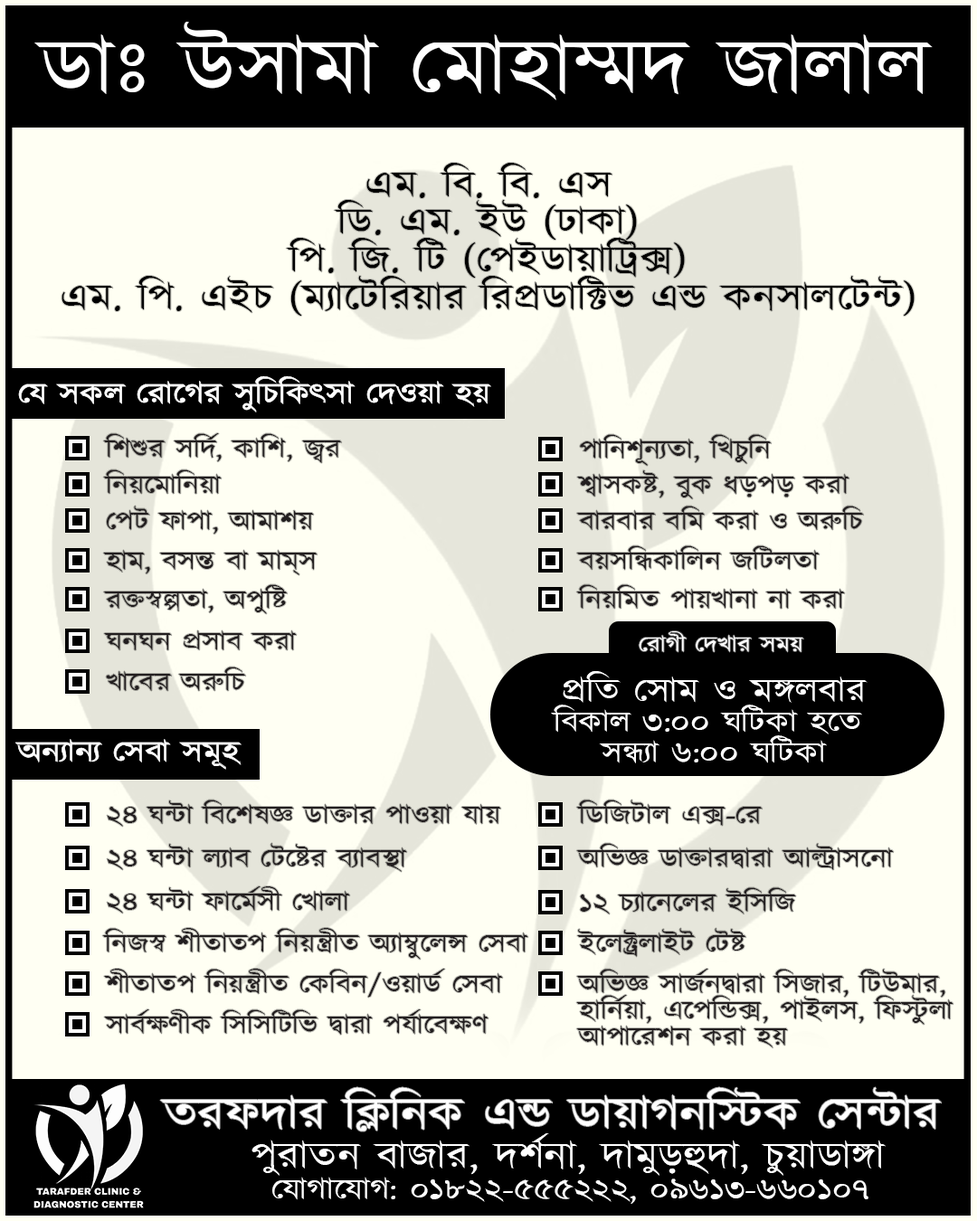
<style>
.page{position:relative;width:977px;height:1221px;background:#fffff3}
.page>*{position:absolute;margin:0}
.t1{font:79.1px "Kalpurush";color:#ffffff;scale:1.16 1}
.t2{font:37.7px/37.7px "Kalpurush";color:#000000;scale:1.16 1}
.t3{font:30.1px "Kalpurush";color:#ffffff;scale:1.16 1}
.t4{font:26.4px "Kalpurush";color:#231f20;scale:1.16 1}
.t5{font:22.6px "Kalpurush";color:#ffffff;scale:1.16 1}
.t6{font:30.1px/30.1px "Kalpurush";color:#ffffff;scale:1.16 1}
.t7{font:33.9px/30.1px "Kalpurush";color:#ffffff;scale:1.16 1}
.t8{font:26.4px/26.4px "Kalpurush";color:#231f20;scale:1.16 1}
.t9{font:45.2px "Kalpurush";color:#ffffff;scale:1.16 1}
.t10{font:37.7px "Kalpurush";color:#ffffff;scale:1.16 1}
</style>
<div class="page">
<p class="t1" style="left:34px;top:22px;width:898px;height:78px">ডাঃ উসামা মোহাম্মদ জালাল</p>
<p class="t2" style="left:61px;top:163px;width:853px;height:154px;text-align:center">এম. বি. বি. এস<br>ডি. এম. ইউ (ঢাকা)<br>পি. জি. টি (পেইডায়াট্রিক্স)<br>এম. পি. এইচ (ম্যাটেরিয়ার রিপ্রডাক্টিভ এন্ড কনসালটেন্ট)</p>
<p class="t3" style="left:18px;top:375px;width:473px;height:38px">যে সকল রোগের সুচিকিৎসা দেওয়া হয়</p>
<p class="t4" style="left:103px;top:433px;width:239px;height:30px">শিশুর সর্দি, কাশি, জ্বর</p>
<p class="t4" style="left:580px;top:434px;width:191px;height:32px">পানিশূন্যতা, খিচুনি</p>
<p class="t4" style="left:103px;top:469px;width:119px;height:25px">নিয়মোনিয়া</p>
<p class="t4" style="left:577px;top:470px;width:272px;height:29px">শ্বাসকষ্ট, বুক ধড়পড় করা</p>
<p class="t4" style="left:106px;top:506px;width:208px;height:28px">পেট ফাপা, আমাশয়</p>
<p class="t4" style="left:576px;top:506px;width:288px;height:24px">বারবার বমি করা ও অরুচি</p>
<p class="t4" style="left:576px;top:545px;width:243px;height:26px">বয়সন্ধিকালিন জটিলতা</p>
<p class="t4" style="left:103px;top:550px;width:214px;height:25px">হাম, বসন্ত বা মাম্‌স</p>
<p class="t4" style="left:103px;top:584px;width:185px;height:30px">রক্তস্বল্পতা, অপুষ্টি</p>
<p class="t4" style="left:576px;top:584px;width:269px;height:25px">নিয়মিত পায়খানা না করা</p>
<p class="t4" style="left:104px;top:630px;width:193px;height:20px">ঘনঘন প্রসাব করা</p>
<p class="t5" style="left:638px;top:631px;width:166px;height:21px">রোগী দেখার সময়</p>
<p class="t4" style="left:106px;top:667px;width:140px;height:24px">খাবের অরুচি</p>
<p class="t6" style="left:551px;top:671px;width:316px;height:92px;text-align:center"><span class="t7">প্রতি সোম ও মঙ্গলবার<br></span>বিকাল ৩:০০ ঘটিকা হতে <br>সন্ধ্যা ৬:০০ ঘটিকা</p>
<p class="t3" style="left:15px;top:739px;width:226px;height:31px">অন্যান্য সেবা সমূহ</p>
<p class="t4" style="left:107px;top:799px;width:394px;height:28px">২৪ ঘন্টা বিশেষজ্ঞ ডাক্তার পাওয়া যায়</p>
<p class="t4" style="left:576px;top:799px;width:186px;height:27px">ডিজিটাল এক্স-রে</p>
<p class="t4" style="left:107px;top:843px;width:300px;height:29px">২৪ ঘন্টা ল্যাব টেষ্টের ব্যাবস্থা</p>
<p class="t4" style="left:576px;top:843px;width:318px;height:27px">অভিজ্ঞ ডাক্তারদ্বারা আল্ট্রাসনো</p>
<p class="t4" style="left:107px;top:886px;width:243px;height:27px">২৪ ঘন্টা ফার্মেসী খোলা</p>
<p class="t4" style="left:580px;top:887px;width:216px;height:27px">১২ চ্যানেলের ইসিজি</p>
<p class="t4" style="left:102px;top:928px;width:426px;height:32px">নিজস্ব শীতাতপ নিয়ন্ত্রীত অ্যাম্বুলেন্স সেবা</p>
<p class="t4" style="left:577px;top:928px;width:169px;height:29px">ইলেক্ট্রলাইট টেষ্ট</p>
<p class="t4" style="left:104px;top:969px;width:399px;height:29px">শীতাতপ নিয়ন্ত্রীত কেবিন/ওয়ার্ড সেবা</p>
<p class="t8" style="left:576px;top:969px;width:377px;height:79px">অভিজ্ঞ সার্জনদ্বারা সিজার, টিউমার,<br>হার্নিয়া, এপেন্ডিক্স, পাইলস, ফিস্টুলা <br>আপারেশন করা হয়</p>
<p class="t4" style="left:104px;top:1009px;width:384px;height:26px">সার্বক্ষণীক সিসিটিভি দ্বারা পর্যাবেক্ষণ</p>
<p class="t9" style="left:160px;top:1087px;width:781px;height:44px">তরফদার ক্লিনিক এন্ড ডায়াগনস্টিক সেন্টার</p>
<p class="t10" style="left:251px;top:1133px;width:634px;height:43px">পুরাতন বাজার, দর্শনা, দামুড়হুদা, চুয়াডাঙ্গা</p>
<p class="t3" style="left:272px;top:1177px;width:596px;height:27px">যোগাযোগ: ০১৮২২-৫৫৫২২২, ০৯৬১৩-৬৬০১০৭</p>
</div>
